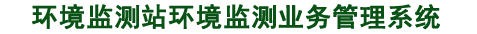
<style>
.page{position:relative;width:477px;height:34px;background:#ffffff}
.page>*{position:absolute;margin:0}
.t1{font:26px "SimHei";letter-spacing:0.1em;color:#095215;font-weight:bold}
</style>
<div class="page">
<p class="t1" style="left:32px;top:4px;width:408px;height:26px">环境监测站环境监测业务管理系统</p>
</div>
